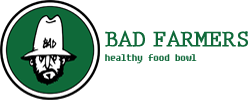
<style>
.page{position:relative;width:250px;height:100px;background:#ffffff}
.page>*{position:absolute;margin:0}
.t1{font:24px "PrestigeEliteStd-Bd";letter-spacing:-0.05em;color:#0f6939;font-weight:bold}
.t2{font:12px "Fixedsys";letter-spacing:-0.05em;color:#0f6939}
</style>
<div class="page">
<p class="t1" style="left:105px;top:30px;width:40px;height:17px">BAD</p>
<p class="t1" style="left:153px;top:30px;width:95px;height:17px">FARMERS</p>
<p class="t2" style="left:105px;top:54px;width:92px;height:10px">healthy food bowl</p>
</div>
